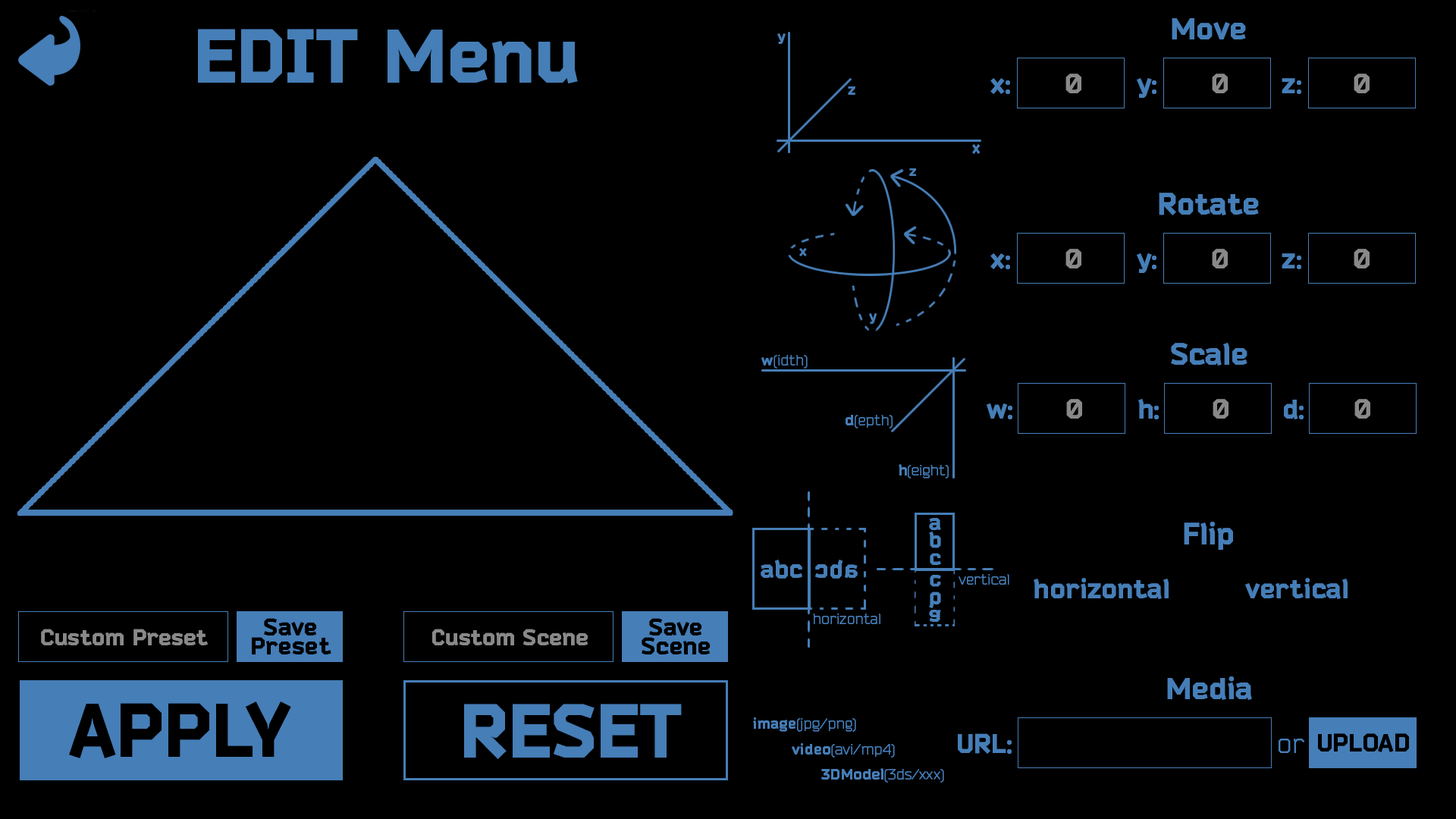
<style>
.page{position:relative;width:1456px;height:819px;background:#000000}
.page>*{position:absolute;margin:0}
.t1{font:75.2px "Bender-Black";color:#467eb7}
.t2{font:30.3px "Bender-Black";color:#467eb7}
.t3{font:15.2px "Bender-Black";color:#467eb7}
.t4{font:27.2px "Bender-Black";color:#898989}
.t5{font:27.2px "Bender-Black";color:#467eb7}
.t6{font:14.2px "Bender-Black";color:#467eb7}
.t7{font:15.2px "Bender";color:#467eb7}
.t8{font:21.8px/17.3px "Bender-Black";color:#467eb7}
.t9{font:24.7px "Bender-Black";color:#467eb7}
.t10{font:22.7px "Bender-Black";color:#898989}
.t11{font:24.2px/19px "Bender-Black";color:#000000}
.t12{font:75.2px "Bender-Black";color:#000000}
.t13{font:25.1px "Bender-Black";color:#000000}
.t14{font:27.2px "Bender";color:#467eb7}
</style>
<div class="page">
<p class="t1" style="left:198px;top:29px;width:380px;height:54px">EDIT Menu</p>
<p class="t2" style="left:1172px;top:18px;width:74px;height:21px">Move</p>
<p class="t3" style="left:777px;top:33px;width:9px;height:11px">y</p>
<p class="t4" style="left:1065px;top:74px;width:16px;height:19px">0</p>
<p class="t4" style="left:1212px;top:74px;width:16px;height:19px">0</p>
<p class="t4" style="left:1354px;top:74px;width:16px;height:19px">0</p>
<p class="t3" style="left:848px;top:86px;width:7px;height:9px">z</p>
<p class="t5" style="left:990px;top:78px;width:20px;height:16px">x:</p>
<p class="t5" style="left:1137px;top:78px;width:19px;height:20px">y:</p>
<p class="t5" style="left:1282px;top:78px;width:19px;height:16px">z:</p>
<p class="t3" style="left:972px;top:144px;width:9px;height:10px">x</p>
<p class="t6" style="left:909px;top:168px;width:7px;height:8px">z</p>
<p class="t2" style="left:1159px;top:193px;width:100px;height:22px">Rotate</p>
<p class="t6" style="left:799px;top:248px;width:8px;height:8px">x</p>
<p class="t5" style="left:990px;top:253px;width:20px;height:16px">x:</p>
<p class="t4" style="left:1065px;top:249px;width:16px;height:19px">0</p>
<p class="t5" style="left:1137px;top:253px;width:19px;height:20px">y:</p>
<p class="t4" style="left:1212px;top:249px;width:16px;height:19px">0</p>
<p class="t5" style="left:1282px;top:253px;width:19px;height:16px">z:</p>
<p class="t4" style="left:1354px;top:249px;width:16px;height:19px">0</p>
<p class="t6" style="left:869px;top:313px;width:8px;height:11px">y</p>
<p class="t2" style="left:1171px;top:343px;width:76px;height:23px">Scale</p>
<p class="t7" style="left:761px;top:355px;width:47px;height:14px"><span class="t3">w</span>(idth)</p>
<p class="t4" style="left:1066px;top:399px;width:16px;height:20px">0</p>
<p class="t5" style="left:1138px;top:399px;width:21px;height:20px">h:</p>
<p class="t4" style="left:1213px;top:399px;width:15px;height:20px">0</p>
<p class="t5" style="left:1284px;top:400px;width:20px;height:19px">d:</p>
<p class="t4" style="left:1354px;top:399px;width:16px;height:20px">0</p>
<p class="t5" style="left:987px;top:403px;width:25px;height:16px">w:</p>
<p class="t7" style="left:846px;top:415px;width:47px;height:13px"><span class="t3">d</span>(epth)</p>
<p class="t7" style="left:899px;top:464px;width:50px;height:15px"><span class="t3">h</span>(eight)</p>
<p class="t8" style="left:929px;top:518px;width:12px;height:47px;text-align:center">a<br>b<br>c</p>
<p class="t2" style="left:1184px;top:522px;width:49px;height:28px">Flip</p>
<p class="t9" style="left:761px;top:560px;width:41px;height:19px">abc</p>
<p class="t9" style="left:815px;top:560px;width:43px;height:19px;rotate:180deg">abc</p>
<p class="t8" style="left:929px;top:575px;width:12px;height:47px;text-align:center">a<br>b<br>c</p>
<p class="t7" style="left:959px;top:574px;width:50px;height:11px">vertical</p>
<p class="t5" style="left:1034px;top:578px;width:135px;height:21px">horizontal</p>
<p class="t5" style="left:1245px;top:578px;width:103px;height:21px">vertical</p>
<p class="t7" style="left:813px;top:613px;width:67px;height:11px">horizontal</p>
<p class="t10" style="left:41px;top:629px;width:167px;height:16px">Custom Preset</p>
<p class="t11" style="left:252px;top:618px;width:79px;height:36px;text-align:center">Save<br>Preset</p>
<p class="t10" style="left:432px;top:629px;width:156px;height:16px">Custom Scene</p>
<p class="t11" style="left:642px;top:618px;width:69px;height:36px;text-align:center">Save<br>Scene</p>
<p class="t2" style="left:1167px;top:676px;width:85px;height:24px">Media</p>
<p class="t12" style="left:69px;top:701px;width:222px;height:57px">APPLY</p>
<p class="t1" style="left:464px;top:704px;width:218px;height:55px">RESET</p>
<p class="t7" style="left:753px;top:717px;width:103px;height:15px"><span class="t3">image</span>(jpg/png)</p>
<p class="t5" style="left:958px;top:733px;width:54px;height:21px">URL:</p>
<p class="t13" style="left:1318px;top:733px;width:91px;height:19px">UPLOAD</p>
<p class="t7" style="left:792px;top:743px;width:103px;height:15px"><span class="t3">video</span>(avi/mp4)</p>
<p class="t14" style="left:1279px;top:739px;width:26px;height:14px">or</p>
<p class="t7" style="left:821px;top:768px;width:123px;height:15px"><span class="t3">3DModel</span>(3ds/xxx)</p>
</div>
